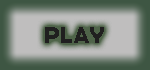
<style>
.page{position:relative;width:150px;height:70px}
.page>*{position:absolute;margin:0}
.t1{font:24px "BerlinSansFBDemi-Bold";color:#060606;text-transform:uppercase}
</style>
<div class="page">
<p class="t1" style="left:45px;top:27px;width:59px;height:16px">Play</p>
</div>
